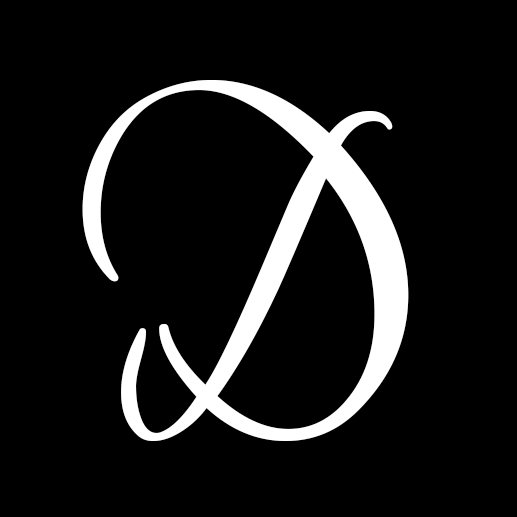
<style>
.page{position:relative;width:517px;height:517px;background:#000000}
.page>*{position:absolute;margin:0}
.t1{font:401px "VNI1SandyNormal";letter-spacing:0.05em;color:#ffffff}
</style>
<div class="page">
<p class="t1" style="left:82px;top:80px;width:327px;height:361px">D</p>
</div>
